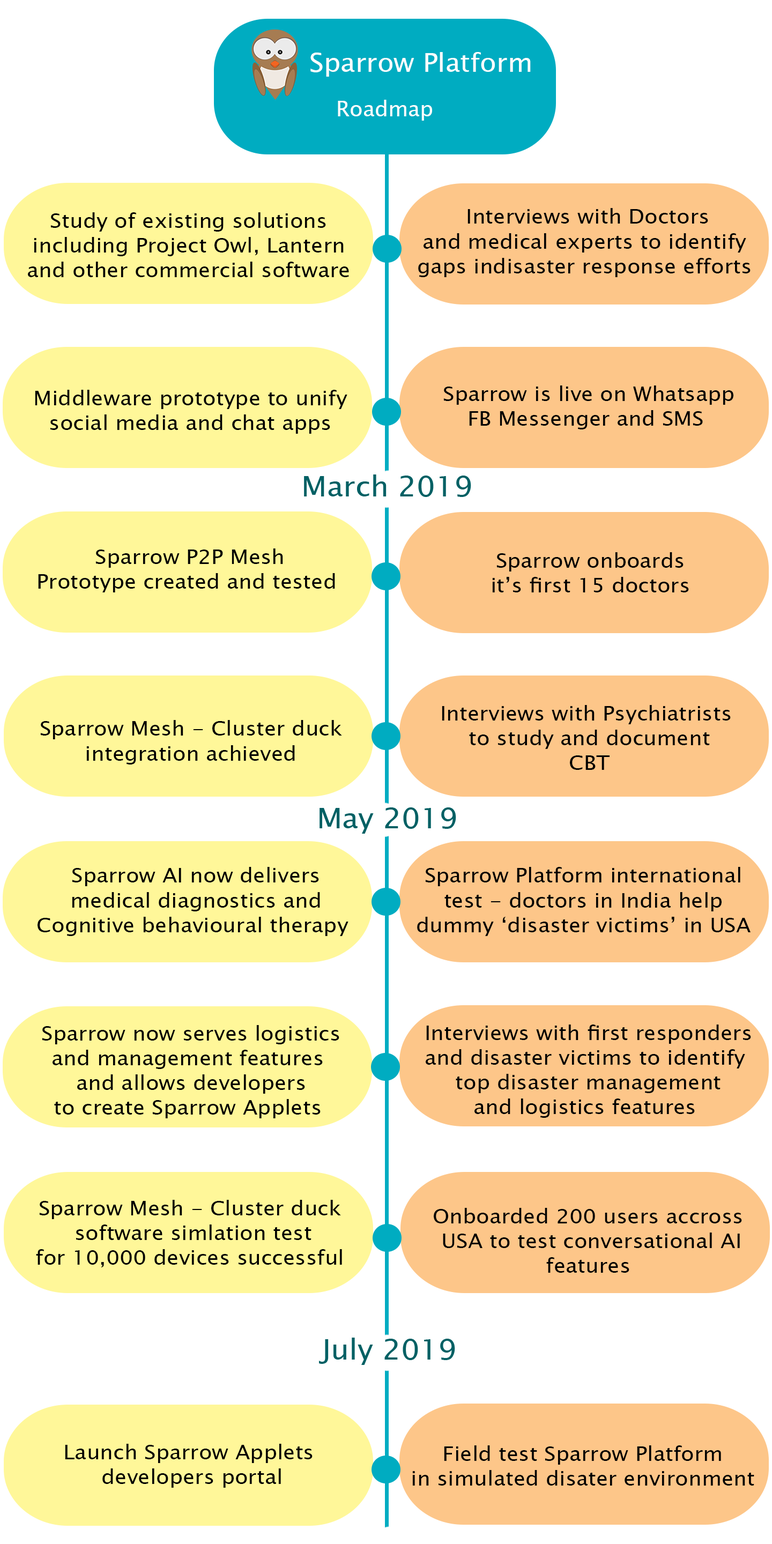
<style>
.page{position:relative;width:772px;height:1544px;background:#ffffff}
.page>*{position:absolute;margin:0}
.t1{font:25.8px "LucidaSansUnicode";color:#ffffff;scale:1.04 1}
.t2{font:21.4px "LucidaSansUnicode";color:#ffffff}
.t3{font:20.6px "LucidaSansUnicode";color:#000000;scale:1.04 1}
.t4{font:28.3px "LucidaSansUnicode";color:#006064;scale:1.04 1}
</style>
<div class="page">
<p class="t1" style="left:310px;top:52px;width:221px;height:25px">Sparrow Platform</p>
<p class="t2" style="left:338px;top:100px;width:94px;height:21px">Roadmap</p>
<p class="t3" style="left:418px;top:208px;width:333px;height:69px;text-align:center">Interviews with Doctors <br> and medical experts to identify <br>gaps indisaster response efforts</p>
<p class="t3" style="left:28px;top:212px;width:321px;height:65px;text-align:center">Study of existing solutions<br>including Project Owl, Lantern<br>and other commercial software</p>
<p class="t3" style="left:35px;top:390px;width:312px;height:44px;text-align:center">Middleware prototype to unify<br>social media and chat apps</p>
<p class="t3" style="left:443px;top:386px;width:291px;height:44px;text-align:center">Sparrow is live on Whatsapp <br>FB Messenger and SMS</p>
<p class="t4" style="left:304px;top:475px;width:167px;height:22px">March 2019</p>
<p class="t3" style="left:38px;top:549px;width:297px;height:44px;text-align:center">Sparrow P2P Mesh <br>Prototype created and tested</p>
<p class="t3" style="left:492px;top:552px;width:197px;height:41px;text-align:center">Sparrow onboards<br> it’s first 15 doctors</p>
<p class="t3" style="left:442px;top:705px;width:289px;height:65px;text-align:center">Interviews with Psychiatrists<br>to study and document <br>CBT</p>
<p class="t3" style="left:40px;top:720px;width:302px;height:45px;text-align:center">Sparrow Mesh - Cluster duck<br>integration achieved</p>
<p class="t4" style="left:320px;top:808px;width:136px;height:26px">May 2019</p>
<p class="t3" style="left:38px;top:867px;width:311px;height:69px;text-align:center">Sparrow AI now delivers <br>medical diagnostics and <br>Cognitive behavioural therapy</p>
<p class="t3" style="left:417px;top:867px;width:334px;height:69px;text-align:center">Sparrow Platform international<br>test - doctors in India help<br>dummy ‘disaster victims’ in USA</p>
<p class="t3" style="left:42px;top:1025px;width:297px;height:94px;text-align:center">Sparrow now serves logistics <br>and management features<br>and allows developers <br>to create Sparrow Applets</p>
<p class="t3" style="left:426px;top:1025px;width:325px;height:93px;text-align:center">Interviews with first responders <br>and disaster victims to identify<br>top disaster management <br>and logistics features</p>
<p class="t3" style="left:36px;top:1200px;width:306px;height:68px;text-align:center">Sparrow Mesh - Cluster duck<br>software simlation test <br>for 10,000 devices successful</p>
<p class="t3" style="left:434px;top:1208px;width:308px;height:65px;text-align:center">Onboarded 200 users accross<br>USA to test conversational AI <br>features</p>
<p class="t4" style="left:319px;top:1338px;width:136px;height:27px">July 2019</p>
<p class="t3" style="left:65px;top:1444px;width:248px;height:44px;text-align:center">Launch Sparrow Applets<br>developers portal</p>
<p class="t3" style="left:412px;top:1446px;width:342px;height:40px;text-align:center">Field test Sparrow Platform<br>in simulated disater environment</p>
</div>
